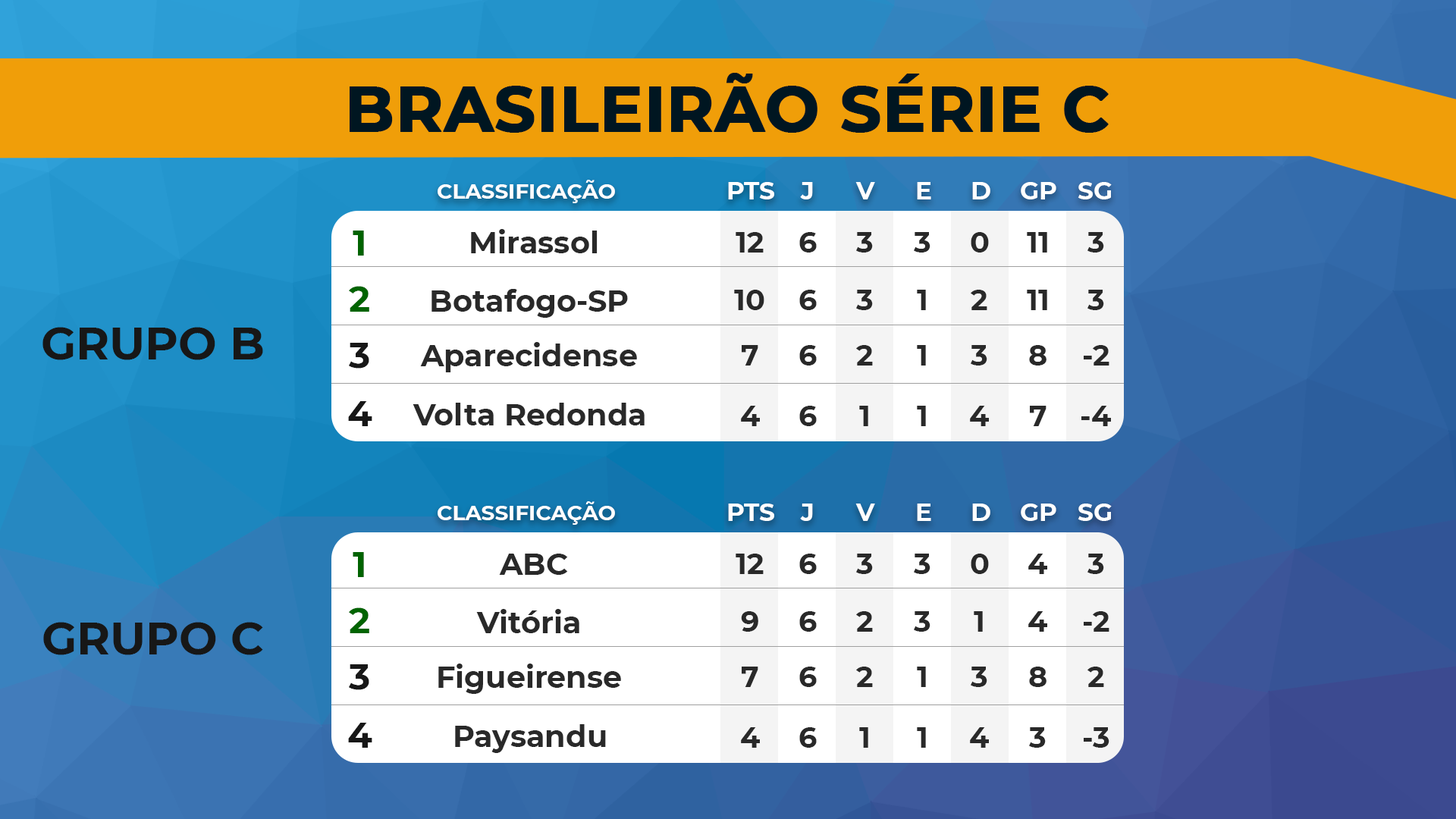
<style>
.page{position:relative;width:1456px;height:819px}
.page>*{position:absolute;margin:0}
.t1{font:63.7px "Montserrat-Bold";color:#001621;text-transform:uppercase;font-weight:bold}
.t2{font:21.1px "Montserrat-Bold";color:#ffffff}
.t3{font:24.8px "Montserrat-Bold";color:#ffffff}
.t4{font:36.2px "Montserrat-Bold";color:#006300}
.t5{font:30.1px "Montserrat-Bold";color:#292929}
.t6{font:28.9px "Montserrat-Bold";color:#292929}
.t7{font:36.2px "Montserrat-Bold";color:#006400}
.t8{font:45.5px "Montserrat-Bold";color:#171717}
.t9{font:36.2px "Montserrat-Bold";color:#171717}
</style>
<div class="page">
<p class="t1" style="left:350px;top:73px;width:759px;height:60px">BRASILEIRÃO SÉRIE C</p>
<p class="t2" style="left:438px;top:180px;width:177px;height:23px">CLASSIFICAÇÃO</p>
<p class="t3" style="left:728px;top:182px;width:46px;height:17px">PTS</p>
<p class="t3" style="left:800px;top:182px;width:13px;height:17px">J</p>
<p class="t3" style="left:855px;top:182px;width:20px;height:17px">V</p>
<p class="t3" style="left:917px;top:182px;width:14px;height:17px">E</p>
<p class="t3" style="left:972px;top:182px;width:18px;height:17px">D</p>
<p class="t3" style="left:1021px;top:182px;width:35px;height:17px">GP</p>
<p class="t3" style="left:1078px;top:182px;width:34px;height:17px">SG</p>
<p class="t4" style="left:353px;top:231px;width:11px;height:25px">1</p>
<p class="t5" style="left:471px;top:229px;width:127px;height:24px">Mirassol</p>
<p class="t6" style="left:736px;top:232px;width:28px;height:21px">12</p>
<p class="t6" style="left:799px;top:232px;width:18px;height:21px">6</p>
<p class="t6" style="left:856px;top:232px;width:17px;height:21px">3</p>
<p class="t6" style="left:914px;top:232px;width:16px;height:21px">3</p>
<p class="t6" style="left:971px;top:232px;width:18px;height:21px">0</p>
<p class="t6" style="left:1027px;top:232px;width:20px;height:21px">11</p>
<p class="t6" style="left:1087px;top:232px;width:17px;height:21px">3</p>
<p class="t7" style="left:349px;top:286px;width:20px;height:26px">2</p>
<p class="t5" style="left:431px;top:289px;width:197px;height:29px">Botafogo-SP</p>
<p class="t6" style="left:734px;top:290px;width:30px;height:20px">10</p>
<p class="t6" style="left:799px;top:290px;width:18px;height:20px">6</p>
<p class="t6" style="left:856px;top:290px;width:17px;height:20px">3</p>
<p class="t6" style="left:917px;top:290px;width:9px;height:20px">1</p>
<p class="t6" style="left:971px;top:290px;width:16px;height:20px">2</p>
<p class="t6" style="left:1027px;top:290px;width:20px;height:20px">11</p>
<p class="t6" style="left:1087px;top:290px;width:17px;height:20px">3</p>
<p class="t8" style="left:42px;top:327px;width:221px;height:33px">GRUPO B</p>
<p class="t9" style="left:349px;top:343px;width:20px;height:26px">3</p>
<p class="t5" style="left:420px;top:342px;width:217px;height:30px">Aparecidense</p>
<p class="t6" style="left:742px;top:345px;width:16px;height:21px">7</p>
<p class="t6" style="left:799px;top:345px;width:18px;height:21px">6</p>
<p class="t6" style="left:856px;top:345px;width:17px;height:21px">2</p>
<p class="t6" style="left:917px;top:345px;width:9px;height:21px">1</p>
<p class="t6" style="left:971px;top:345px;width:16px;height:21px">3</p>
<p class="t6" style="left:1029px;top:345px;width:17px;height:21px">8</p>
<p class="t6" style="left:1084px;top:345px;width:25px;height:21px">-2</p>
<p class="t9" style="left:348px;top:401px;width:24px;height:25px">4</p>
<p class="t5" style="left:413px;top:403px;width:232px;height:22px">Volta Redonda</p>
<p class="t6" style="left:741px;top:406px;width:19px;height:20px">4</p>
<p class="t6" style="left:799px;top:406px;width:18px;height:20px">6</p>
<p class="t6" style="left:859px;top:406px;width:9px;height:20px">1</p>
<p class="t6" style="left:917px;top:406px;width:9px;height:20px">1</p>
<p class="t6" style="left:970px;top:406px;width:19px;height:20px">4</p>
<p class="t6" style="left:1030px;top:406px;width:16px;height:20px">7</p>
<p class="t6" style="left:1081px;top:406px;width:30px;height:20px">-4</p>
<p class="t2" style="left:438px;top:501px;width:177px;height:24px">CLASSIFICAÇÃO</p>
<p class="t3" style="left:728px;top:504px;width:46px;height:17px">PTS</p>
<p class="t3" style="left:800px;top:504px;width:13px;height:17px">J</p>
<p class="t3" style="left:855px;top:504px;width:20px;height:17px">V</p>
<p class="t3" style="left:917px;top:504px;width:14px;height:17px">E</p>
<p class="t3" style="left:972px;top:504px;width:18px;height:17px">D</p>
<p class="t3" style="left:1021px;top:504px;width:35px;height:17px">GP</p>
<p class="t3" style="left:1078px;top:504px;width:34px;height:17px">SG</p>
<p class="t4" style="left:353px;top:552px;width:11px;height:25px">1</p>
<p class="t5" style="left:499px;top:554px;width:69px;height:21px">ABC</p>
<p class="t6" style="left:736px;top:554px;width:28px;height:20px">12</p>
<p class="t6" style="left:799px;top:554px;width:18px;height:20px">6</p>
<p class="t6" style="left:856px;top:554px;width:17px;height:20px">3</p>
<p class="t6" style="left:914px;top:554px;width:16px;height:20px">3</p>
<p class="t6" style="left:971px;top:554px;width:18px;height:20px">0</p>
<p class="t6" style="left:1028px;top:554px;width:19px;height:20px">4</p>
<p class="t6" style="left:1087px;top:554px;width:17px;height:20px">3</p>
<p class="t7" style="left:349px;top:607px;width:20px;height:26px">2</p>
<p class="t5" style="left:476px;top:609px;width:103px;height:24px">Vitória</p>
<p class="t6" style="left:741px;top:611px;width:17px;height:21px">9</p>
<p class="t6" style="left:799px;top:611px;width:18px;height:21px">6</p>
<p class="t6" style="left:856px;top:611px;width:17px;height:21px">2</p>
<p class="t6" style="left:914px;top:611px;width:16px;height:21px">3</p>
<p class="t6" style="left:974px;top:611px;width:9px;height:21px">1</p>
<p class="t6" style="left:1028px;top:611px;width:19px;height:21px">4</p>
<p class="t6" style="left:1084px;top:611px;width:25px;height:21px">-2</p>
<p class="t8" style="left:43px;top:622px;width:220px;height:33px">GRUPO C</p>
<p class="t9" style="left:349px;top:664px;width:20px;height:26px">3</p>
<p class="t5" style="left:438px;top:664px;width:183px;height:30px">Figueirense</p>
<p class="t6" style="left:742px;top:667px;width:16px;height:20px">7</p>
<p class="t6" style="left:799px;top:667px;width:18px;height:20px">6</p>
<p class="t6" style="left:856px;top:667px;width:17px;height:20px">2</p>
<p class="t6" style="left:917px;top:667px;width:9px;height:20px">1</p>
<p class="t6" style="left:971px;top:667px;width:16px;height:20px">3</p>
<p class="t6" style="left:1029px;top:667px;width:17px;height:20px">8</p>
<p class="t6" style="left:1087px;top:667px;width:17px;height:20px">2</p>
<p class="t9" style="left:348px;top:723px;width:24px;height:25px">4</p>
<p class="t5" style="left:455px;top:724px;width:151px;height:29px">Paysandu</p>
<p class="t6" style="left:741px;top:727px;width:19px;height:21px">4</p>
<p class="t6" style="left:799px;top:727px;width:18px;height:21px">6</p>
<p class="t6" style="left:859px;top:727px;width:9px;height:21px">1</p>
<p class="t6" style="left:917px;top:727px;width:9px;height:21px">1</p>
<p class="t6" style="left:970px;top:727px;width:19px;height:21px">4</p>
<p class="t6" style="left:1029px;top:727px;width:17px;height:21px">3</p>
<p class="t6" style="left:1084px;top:727px;width:25px;height:21px">-3</p>
</div>
